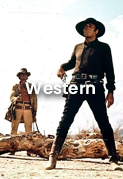
<style>
.page{position:relative;width:123px;height:179px;background:#ffffff}
.page>*{position:absolute;margin:0}
.t1{font:16.7px "Poppins-SemiBold";color:#ffffff}
</style>
<div class="page">
<p class="t1" style="left:25px;top:82px;width:70px;height:13px">Western</p>
</div>
